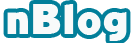
<style>
.page{position:relative;width:134px;height:43px;background:#f8fafa}
.page>*{position:absolute;margin:0}
.t1{font:43px "Neasden-Regular";color:#f8fafa}
</style>
<div class="page">
<p class="t1" style="left:7px;top:4px;width:120px;height:37px">nBlog</p>
</div>
